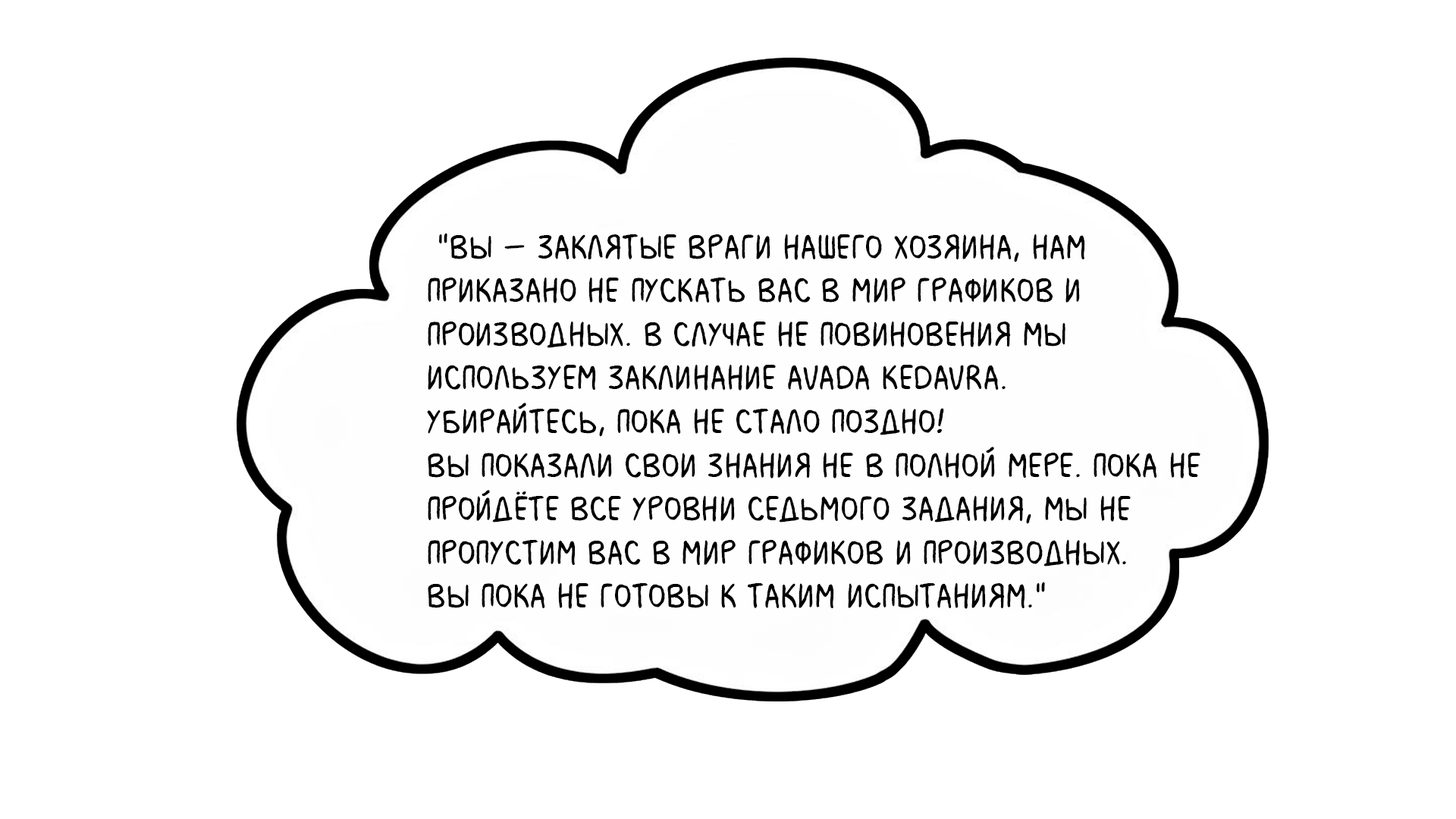
<style>
.page{position:relative;width:1456px;height:819px;background:#ffffff}
.page>*{position:absolute;margin:0}
.t1{font:36.4px "MilkMustacheBB";color:#000000}
</style>
<div class="page">
<p class="t1" style="left:427px;top:233px;width:773px;height:376px">"Вы – заклятые враги нашего хозяина, нам <br>приказано не пускать вас в мир графиков и <br>производных. В случае не повиновения мы <br>используем заклинание Avada Kedavra. <br>Убирайтесь, пока не стало поздно!<br>Вы показали свои знания не в полной мере. Пока не <br>пройдёте все уровни седьмого задания, мы не <br>пропустим вас в мир графиков и производных. <br>Вы пока не готовы к таким испытаниям."</p>
</div>
